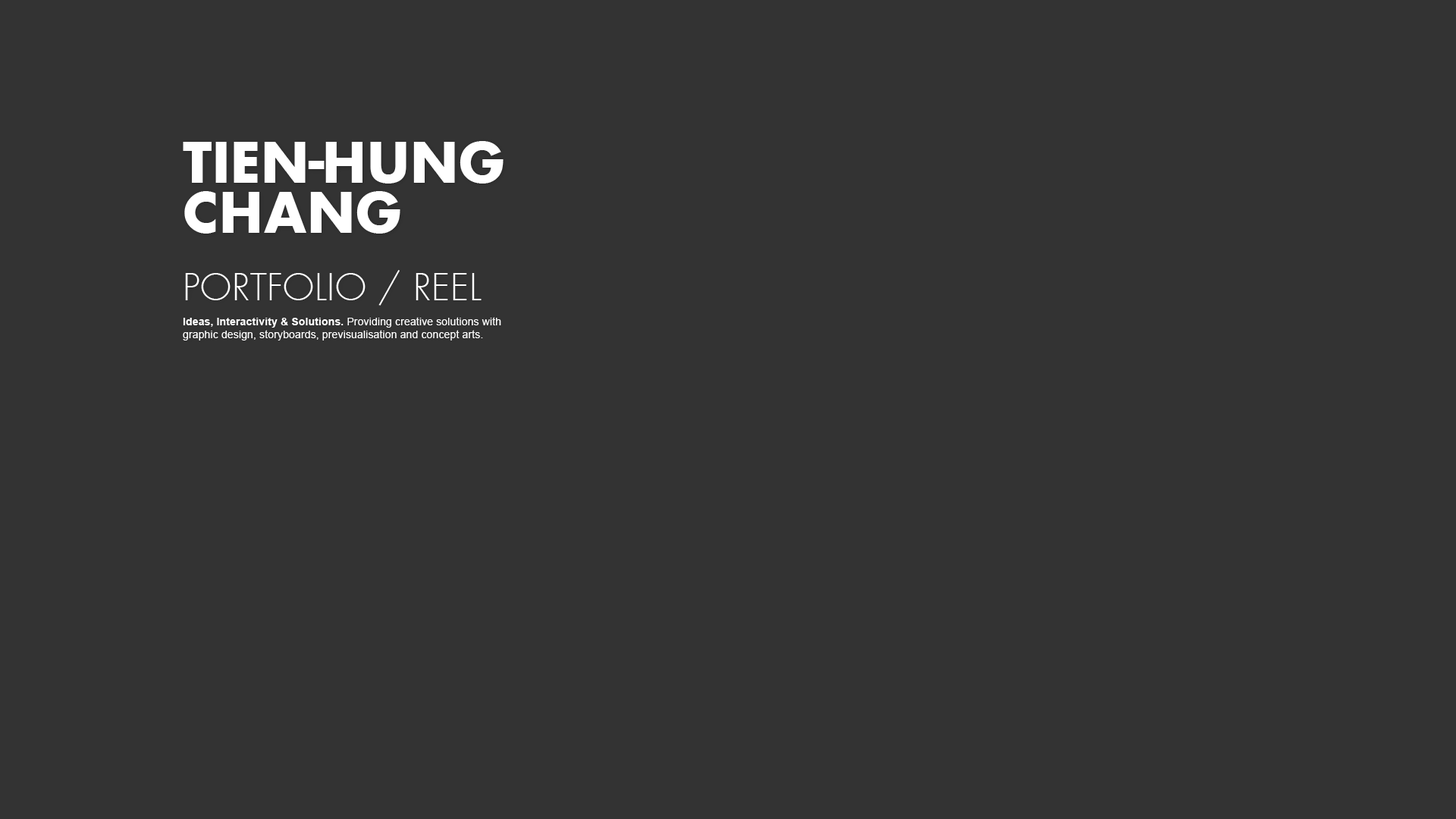
<style>
.page{position:relative;width:1456px;height:819px;background:#333333}
.page>*{position:absolute;margin:0}
.t1{font:54.6px "Futura-Bold";letter-spacing:0.01em;color:#ffffff}
.t2{font:54.6px "Futura-Bold";letter-spacing:-0.075em;color:#ffffff}
.t3{font:36.4px "FuturaLight";letter-spacing:0.01em;color:#ffffff}
.t4{font:10.6px "ArialMT";letter-spacing:0.01em;color:#ffffff}
.t5{font:10.6px "Arial-BoldMT";letter-spacing:0.01em;color:#ffffff}
</style>
<div class="page">
<p class="t1" style="left:183px;top:141px;width:321px;height:43px">TIE<span class="t2">N-</span>HUNG</p>
<p class="t1" style="left:184px;top:191px;width:216px;height:43px">CHANG</p>
<p class="t3" style="left:185px;top:270px;width:297px;height:36px">PORTFOLIO / REEL</p>
<p class="t4" style="left:183px;top:317px;width:318px;height:23px"><span class="t5">Ideas, Interactivity &amp; Solutions.</span> Providing creative solutions with <br>graphic design, storyboards, previsualisation and concept arts.</p>
</div>
